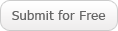
<style>
.page{position:relative;width:118px;height:31px}
.page>*{position:absolute;margin:0}
.t1{font:13px "Tahoma";letter-spacing:0.025em;color:#666666}
</style>
<div class="page">
<p class="t1" style="left:12px;top:10px;width:94px;height:10px">Submit for Free</p>
</div>
